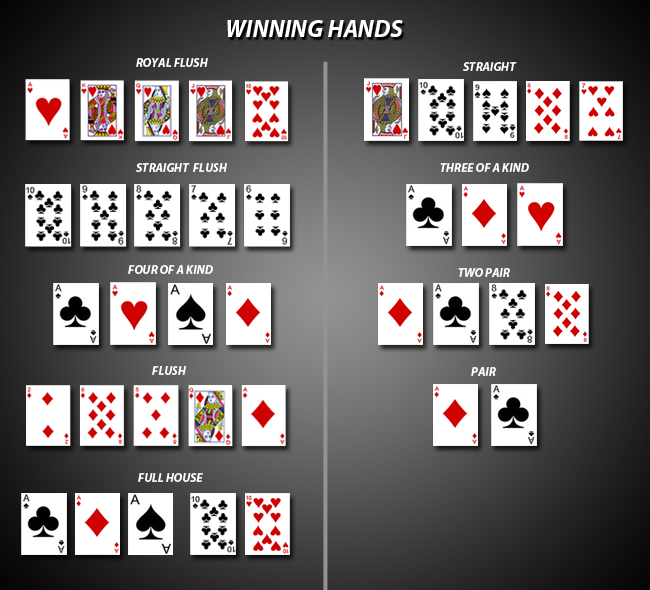
<style>
.page{position:relative;width:650px;height:590px}
.page>*{position:absolute;margin:0}
.t1{font:24px "MyriadPro-BoldIt";color:#ffffff}
.t2{font:12px "MyriadPro-BoldIt";color:#ffffff}
</style>
<div class="page">
<p class="t1" style="left:227px;top:20px;width:176px;height:17px">WINNING HANDS</p>
<p class="t2" style="left:136px;top:58px;width:72px;height:9px">ROYAL FLUSH</p>
<p class="t2" style="left:463px;top:62px;width:54px;height:9px">STRAIGHT</p>
<p class="t2" style="left:136px;top:163px;width:92px;height:9px">STRAIGHT  FLUSH</p>
<p class="t2" style="left:440px;top:163px;width:89px;height:9px">THREE OF A KIND</p>
<p class="t2" style="left:128px;top:265px;width:85px;height:9px">FOUR OF A KIND</p>
<p class="t2" style="left:458px;top:268px;width:52px;height:9px">TWO PAIR</p>
<p class="t2" style="left:152px;top:366px;width:35px;height:9px">FLUSH</p>
<p class="t2" style="left:471px;top:367px;width:25px;height:9px">PAIR</p>
<p class="t2" style="left:138px;top:473px;width:65px;height:9px">FULL HOUSE</p>
</div>
